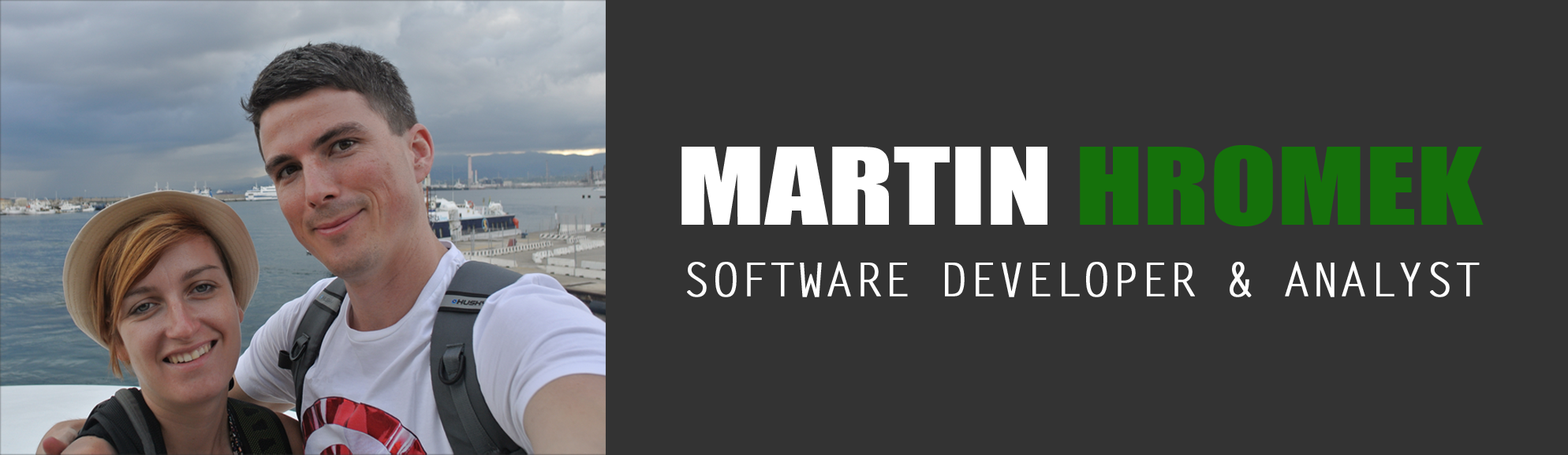
<style>
.page{position:relative;width:1568px;height:455px;background:#333333}
.page>*{position:absolute;margin:0}
.t1{font:98.6px "Impact";color:#ffffff;text-transform:uppercase;scale:1.25 1}
.t2{font:98.6px "Impact";color:#15710b;text-transform:uppercase;scale:1.25 1}
.t3{font:46px "LetterGothicStd";color:#ffffff;text-transform:uppercase;font-weight:bold}
</style>
<div class="page">
<p class="t1" style="left:681px;top:145px;width:803px;height:81px">Martin <span class="t2">hromek</span></p>
<p class="t3" style="left:687px;top:261px;width:793px;height:36px">software developer &amp; analyst</p>
</div>
